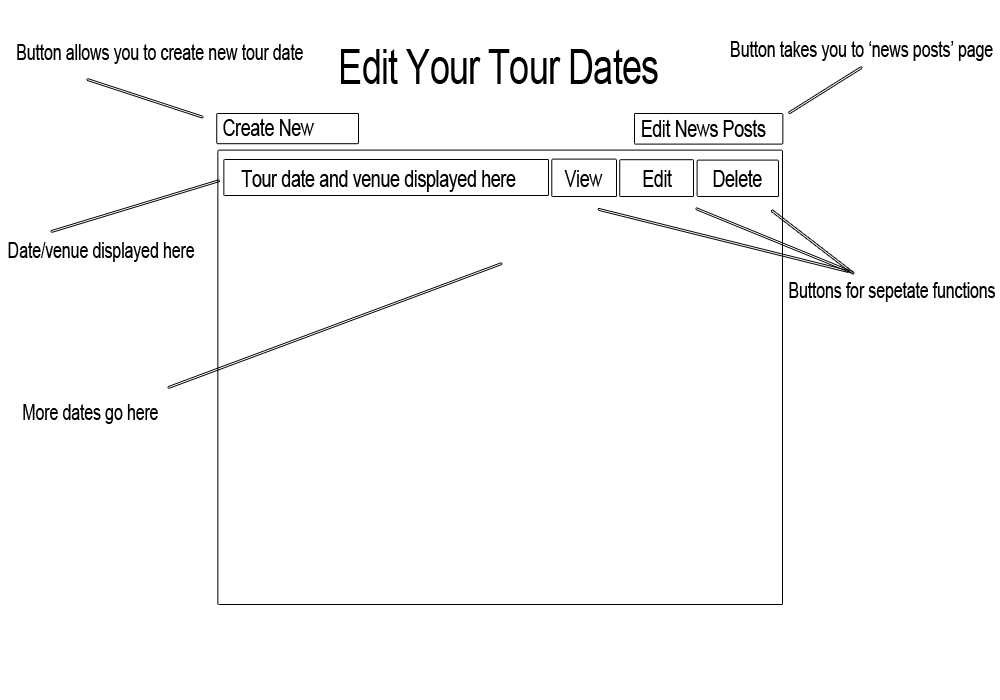
<style>
.page{position:relative;width:1000px;height:700px;background:#ffffff}
.page>*{position:absolute;margin:0}
.t1{font:22.3px "ArialMT";letter-spacing:-0.02em;color:#000000;scale:0.73 1}
.t2{font:48.7px "ArialMT";letter-spacing:-0.02em;color:#000000;scale:0.73 1}
.t3{font:24.4px "ArialMT";letter-spacing:-0.02em;color:#000000;scale:0.73 1}
</style>
<div class="page">
<p class="t1" style="left:731px;top:41px;width:262px;height:20px">Button takes you to ‘news posts’ page</p>
<p class="t1" style="left:17px;top:44px;width:286px;height:20px">Button allows you to create new tour date</p>
<p class="t2" style="left:341px;top:49px;width:317px;height:35px">Edit Your Tour Dates</p>
<p class="t3" style="left:223px;top:118px;width:91px;height:18px">Create New</p>
<p class="t3" style="left:642px;top:119px;width:124px;height:18px">Edit News Posts</p>
<p class="t3" style="left:241px;top:169px;width:275px;height:23px">Tour date and venue displayed here</p>
<p class="t3" style="left:564px;top:170px;width:39px;height:17px">View</p>
<p class="t3" style="left:643px;top:169px;width:29px;height:18px">Edit</p>
<p class="t3" style="left:713px;top:169px;width:49px;height:18px">Delete</p>
<p class="t1" style="left:8px;top:242px;width:187px;height:20px">Date/venue displayed here</p>
<p class="t1" style="left:789px;top:282px;width:206px;height:20px">Buttons for sepetate functions</p>
<p class="t1" style="left:23px;top:404px;width:135px;height:20px">More dates go here</p>
</div>
